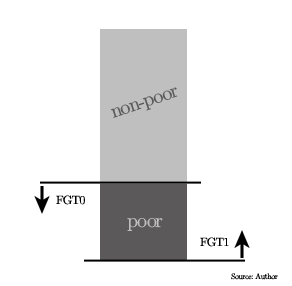
<style>
.page{position:relative;width:292px;height:286px;background:#ffffff}
.page>*{position:absolute;margin:0}
.t1{font:20px "CMUSerif-Roman";letter-spacing:-0.06em;color:#5b5959}
.t2{font:12px "CMUSerif-Roman";letter-spacing:-0.06em;color:#000000}
.t3{font:20px "CMUSerif-Roman";letter-spacing:-0.06em;color:#bfbfbf}
.t4{font:8px "CMUSerif-Roman";letter-spacing:-0.06em;color:#000000}
</style>
<div class="page">
<p class="t1" style="left:110px;top:87px;width:68px;height:31px;rotate:-19deg">non-poor</p>
<p class="t2" style="left:56px;top:195px;width:29px;height:10px">FGT0</p>
<p class="t3" style="left:127px;top:217px;width:36px;height:14px">poor</p>
<p class="t2" style="left:200px;top:237px;width:29px;height:10px">FGT1</p>
<p class="t4" style="left:231px;top:273px;width:47px;height:7px">Source: Author</p>
</div>
